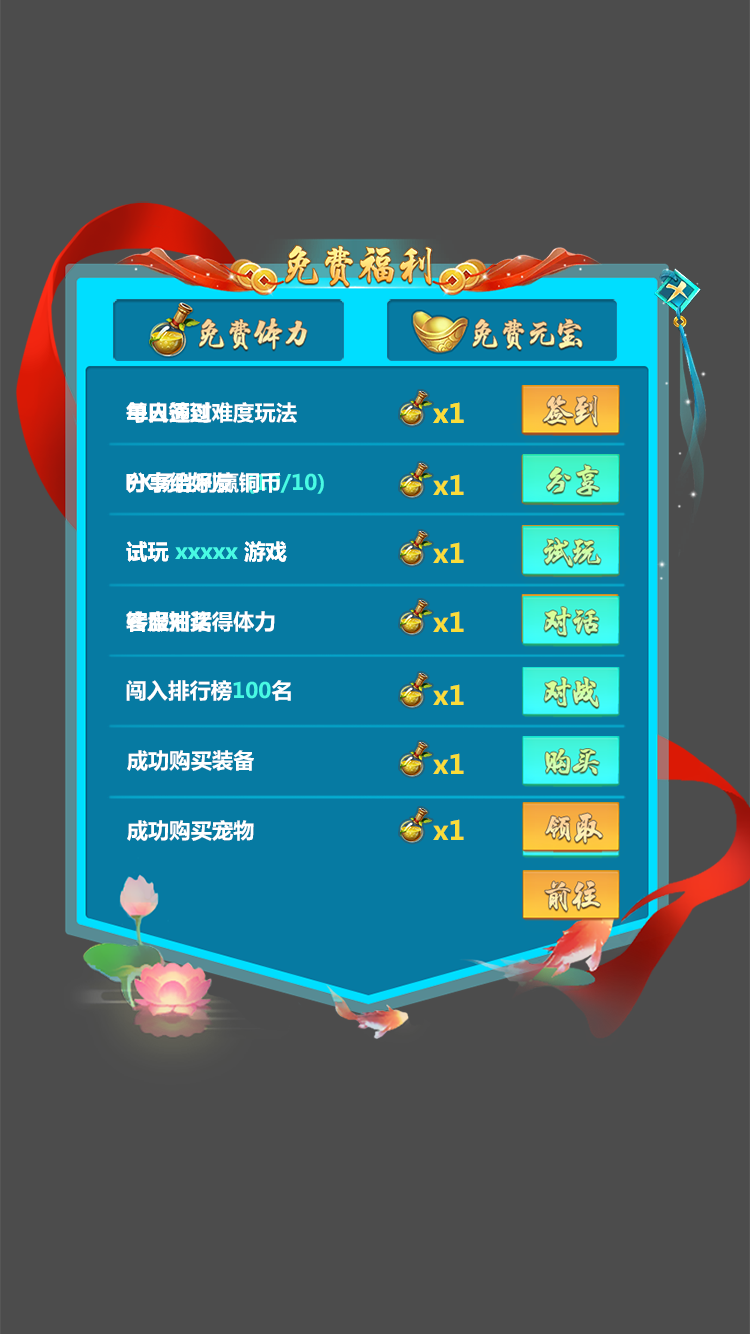
<style>
.page{position:relative;width:750px;height:1334px;background:#4c4c4c}
.page>*{position:absolute;margin:0}
.t1{font:21.2px "MicrosoftYaHei-Bold";letter-spacing:0.005em;color:#ffffff}
.t2{font:26.5px "MicrosoftYaHei-Bold";letter-spacing:0.005em;color:#fadc39}
.t3{font:21.2px "MicrosoftYaHei-Bold";letter-spacing:0.005em;color:#48fae3}
</style>
<div class="page">
<p class="t1" style="left:126px;top:402px;width:84px;height:21px">每日签到</p>
<p class="t1" style="left:127px;top:402px;width:170px;height:21px">单人通过难度玩法</p>
<p class="t2" style="left:433px;top:402px;width:31px;height:21px">x1</p>
<p class="t1" style="left:126px;top:472px;width:155px;height:21px">PK场胜利赢铜币</p>
<p class="t1" style="left:127px;top:472px;width:106px;height:21px">分享给好友</p>
<p class="t3" style="left:248px;top:473px;width:76px;height:21px">(10/10)</p>
<p class="t2" style="left:433px;top:474px;width:31px;height:21px">x1</p>
<p class="t3" style="left:126px;top:541px;width:161px;height:21px"><span class="t1">试玩 </span>xxxxx <span class="t1">游戏</span></p>
<p class="t3" style="left:126px;top:541px;width:161px;height:21px"><span class="t1">试玩 </span>xxxxx <span class="t1">游戏</span></p>
<p class="t2" style="left:433px;top:542px;width:31px;height:21px">x1</p>
<p class="t1" style="left:126px;top:611px;width:85px;height:21px">转盘抽奖</p>
<p class="t1" style="left:127px;top:611px;width:148px;height:21px">客服对话得体力</p>
<p class="t2" style="left:433px;top:611px;width:31px;height:21px">x1</p>
<p class="t1" style="left:126px;top:680px;width:165px;height:21px">闯入排行榜<span class="t3">100</span>名</p>
<p class="t2" style="left:433px;top:684px;width:31px;height:21px">x1</p>
<p class="t1" style="left:127px;top:750px;width:127px;height:21px">成功购买装备</p>
<p class="t2" style="left:433px;top:753px;width:31px;height:21px">x1</p>
<p class="t1" style="left:127px;top:820px;width:127px;height:21px">成功购买宠物</p>
<p class="t2" style="left:433px;top:819px;width:31px;height:21px">x1</p>
</div>
